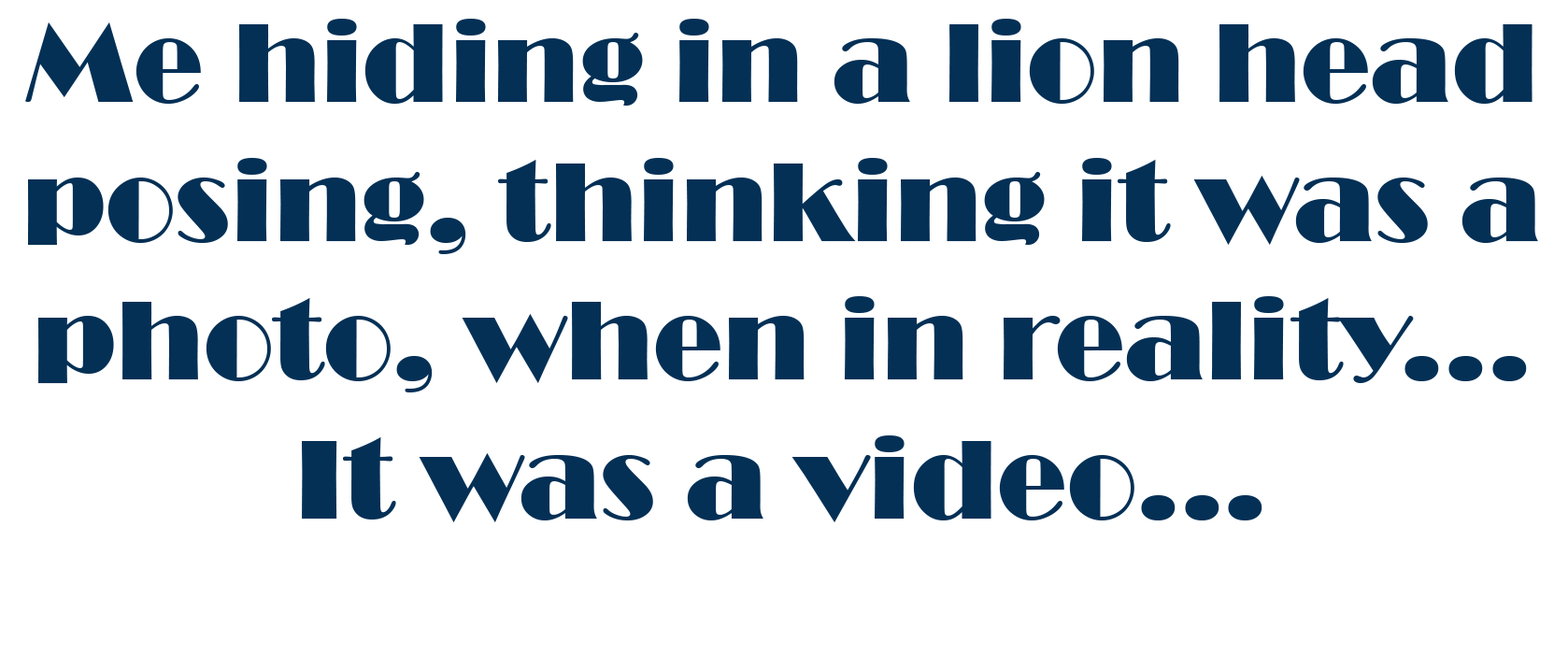
<style>
.page{position:relative;width:1568px;height:669px;background:#ffffff}
.page>*{position:absolute;margin:0}
.t1{font:115.9px "Broadway";color:#043056}
</style>
<div class="page">
<p class="t1" style="left:25px;top:19px;width:1513px;height:503px;text-align:center">Me hiding in a lion head posing, thinking it was a photo, when in reality... It was a video...</p>
</div>
